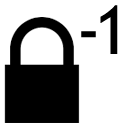
<style>
.page{position:relative;width:128px;height:128px;background:#ffffff}
.page>*{position:absolute;margin:0}
.t1{font:67.8px "TrebuchetMS";letter-spacing:0.02em;color:#000000}
</style>
<div class="page">
<p class="t1" style="left:81px;top:5px;width:37px;height:49px">-1</p>
</div>
